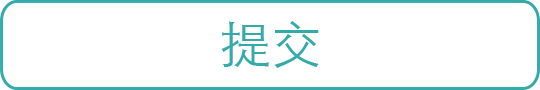
<style>
.page{position:relative;width:540px;height:90px;background:#ffffff}
.page>*{position:absolute;margin:0}
.t1{font:51px "STHeitiSC-Light";color:#35aaaa;text-transform:uppercase}
</style>
<div class="page">
<p class="t1" style="left:221px;top:21px;width:98px;height:47px">提交</p>
</div>
